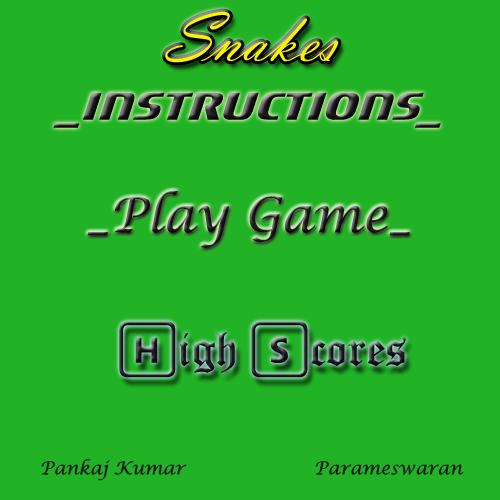
<style>
.page{position:relative;width:500px;height:500px;background:#21b325}
.page>*{position:absolute;margin:0}
.t1{font:72px "VladimirScript";color:#f8f400}
.t2{font:60px "Motorwerk"}
.t3{font:48px "LucidaCalligraphy-Italic";color:#1d1d1d}
.t4{font:48px "OldEnglishTextMT";color:#1d1d1d}
.t5{font:48px "SegoeKeycaps";color:#1d1d1d}
.t6{font:18px "LucidaCalligraphy-Italic";color:#1d1d1d}
</style>
<div class="page">
<p class="t1" style="left:165px;top:11px;width:174px;height:52px">Snakes</p>
<p class="t2" style="left:53px;top:92px;width:388px;height:36px">_INSTRUCTIONS_</p>
<p class="t3" style="left:87px;top:190px;width:323px;height:58px">_Play Game_</p>
<p class="t4" style="left:119px;top:321px;width:287px;height:57px"><span class="t5">H</span>igh <span class="t5">S</span>cores</p>
<p class="t6" style="left:41px;top:458px;width:146px;height:23px">Pankaj Kumar</p>
<p class="t6" style="left:315px;top:461px;width:149px;height:14px">Parameswaran</p>
</div>
